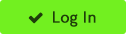
<style>
.page{position:relative;width:126px;height:34px;background:#72f020}
.page>*{position:absolute;margin:0}
.t1{font:16px "HKGrotesk-Medium";color:#1e3e0a;font-weight:bold}
</style>
<div class="page">
<p class="t1" style="left:53px;top:11px;width:43px;height:16px">Log In</p>
</div>
